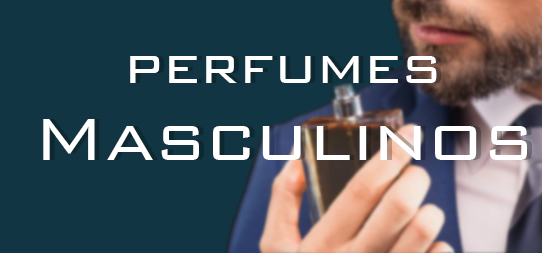
<style>
.page{position:relative;width:542px;height:253px;background:#123543}
.page>*{position:absolute;margin:0}
.t1{font:64px "BankGothicBT-Light";color:#ffffff}
.t2{font:80px "BankGothicBT-Light";color:#ffffff}
</style>
<div class="page">
<p class="t1" style="left:130px;top:56px;width:307px;height:27px">perfumes</p>
<p class="t2" style="left:43px;top:119px;width:484px;height:41px">Masculinos</p>
</div>
